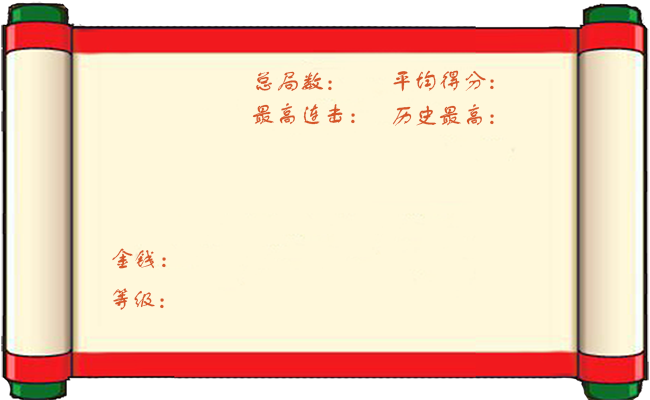
<style>
.page{position:relative;width:650px;height:400px;background:#fff8db}
.page>*{position:absolute;margin:0}
.t1{font:24px "FZSTK--GBK1-0";color:#d65627}
</style>
<div class="page">
<p class="t1" style="left:256px;top:71px;width:76px;height:20px">总局数：</p>
<p class="t1" style="left:393px;top:70px;width:101px;height:22px">平均得分：</p>
<p class="t1" style="left:252px;top:103px;width:103px;height:22px">最高连击：</p>
<p class="t1" style="left:392px;top:104px;width:102px;height:22px">历史最高：</p>
<p class="t1" style="left:112px;top:248px;width:54px;height:21px">金钱：</p>
<p class="t1" style="left:113px;top:288px;width:51px;height:22px">等级：</p>
</div>
